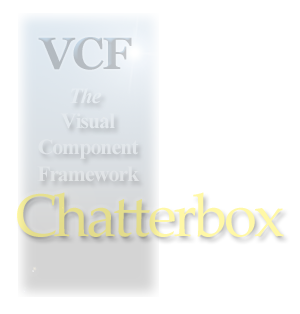
<style>
.page{position:relative;width:300px;height:314px;background:#ffffff}
.page>*{position:absolute;margin:0}
.t1{font:45px "Georgia-Bold";letter-spacing:-0.05em;color:#bac0c5}
.t2{font:22px "TimesNewRomanPS-BoldItalicMT";letter-spacing:-0.05em;color:#e6ecf1}
.t3{font:22px "TimesNewRomanPS-BoldMT";letter-spacing:-0.05em;color:#e1e6e9}
.t4{font:60px "PalatinoLinotype-Roman";letter-spacing:-0.05em;color:#f1ea99}
</style>
<div class="page">
<p class="t1" style="left:38px;top:37px;width:94px;height:33px">VCF</p>
<p class="t2" style="left:70px;top:88px;width:32px;height:16px">The</p>
<p class="t3" style="left:37px;top:113px;width:103px;height:69px;text-align:center">Visual<br>Component<br>Framework</p>
<p class="t4" style="left:17px;top:192px;width:267px;height:45px">Chatterbox</p>
</div>
